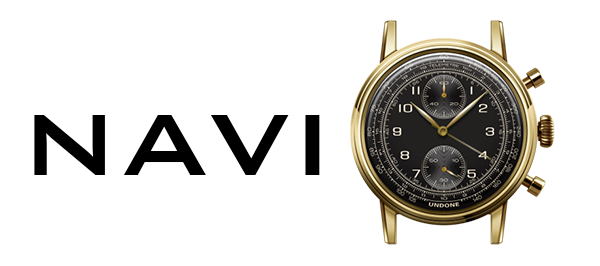
<style>
.page{position:relative;width:600px;height:266px;background:#ffffff}
.page>*{position:absolute;margin:0}
.t1{font:116.6px "BankGothicBT-Medium";color:#000000}
</style>
<div class="page">
<p class="t1" style="left:34px;top:115px;width:286px;height:60px">NAVI</p>
</div>
